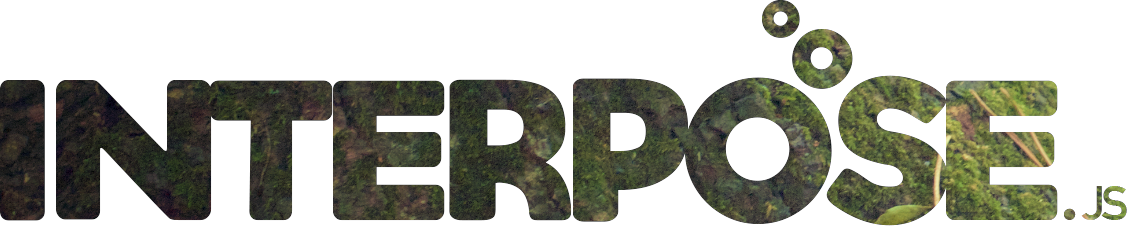
<style>
.page{position:relative;width:1127px;height:226px;background:#ffffff}
.page>*{position:absolute;margin:0}
.t1{font:200px "Aquino-Demo";letter-spacing:-0.095em}
.t2{font:48px "Aquino-Demo";letter-spacing:-0.095em}
.t3{font:48px "DINAlternate-Bold";letter-spacing:-0.095em}
</style>
<div class="page">
<p class="t1" style="left:0px;top:0px;width:1127px;height:226px">Interpose <span class="t2">. </span><span class="t3">JS</span></p>
</div>
